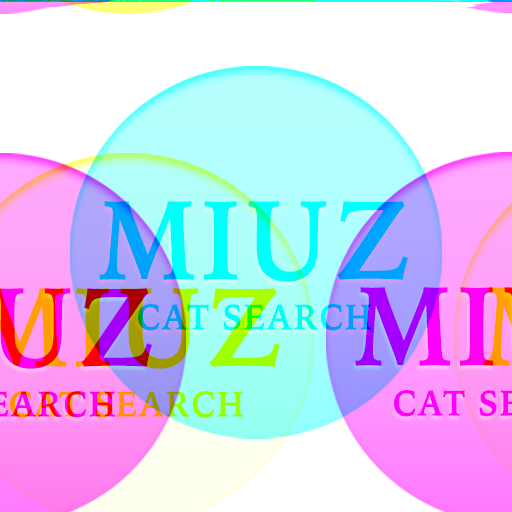
<style>
.page{position:relative;width:512px;height:512px;background:#ffffff}
.page>*{position:absolute;margin:0}
.t1{font:112.2px "IowanOldStyle-Bold";letter-spacing:0.025em;text-transform:uppercase;font-weight:bold;scale:0.91 1}
.t2{font:35.5px "IowanOldStyle-Bold";letter-spacing:0.025em;text-transform:uppercase;font-weight:bold;scale:0.91 1}
</style>
<div class="page">
<p class="t1" style="left:99px;top:199px;width:309px;height:81px">MIUZ</p>
<p class="t2" style="left:138px;top:302px;width:233px;height:27px">cat search</p>
</div>
